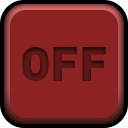
<style>
.page{position:relative;width:128px;height:128px;background:#8c2323}
.page>*{position:absolute;margin:0}
.t1{font:48px "DIN-Black";color:#621818}
</style>
<div class="page">
<p class="t1" style="left:22px;top:47px;width:84px;height:34px">OFF</p>
</div>
